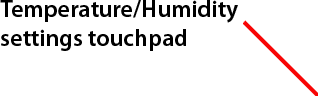
<style>
.page{position:relative;width:318px;height:96px;background:#ffffff}
.page>*{position:absolute;margin:0}
.t1{font:24px "MyriadPro-Semibold";color:#000000}
</style>
<div class="page">
<p class="t1" style="left:0px;top:0px;width:238px;height:51px">Temperature/Humidity<br>settings touchpad</p>
</div>
